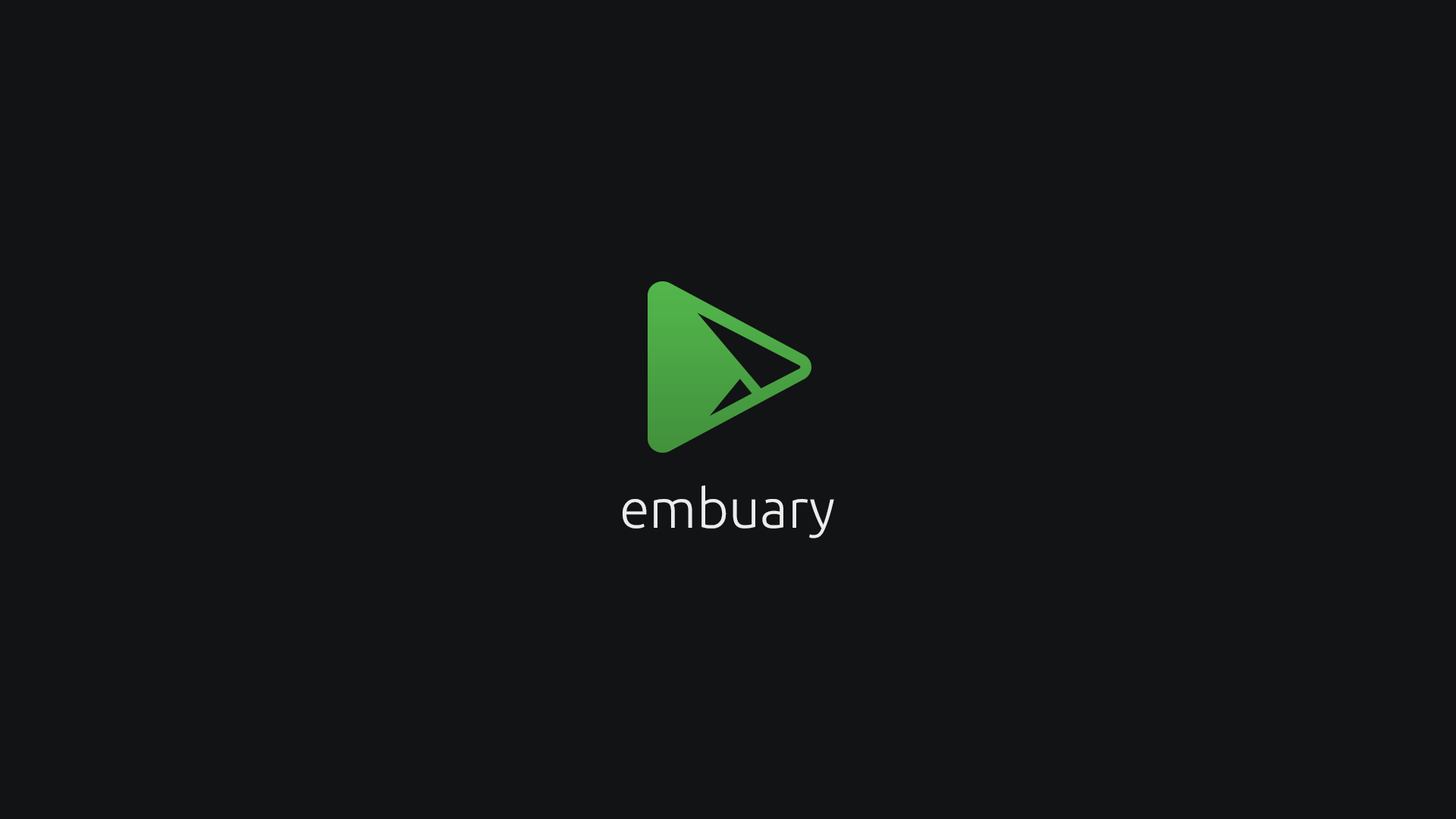
<style>
.page{position:relative;width:1456px;height:819px;background:#121314}
.page>*{position:absolute;margin:0}
.t1{font:54.6px "Ubuntu-Light";color:#ececec}
</style>
<div class="page">
<p class="t1" style="left:623px;top:485px;width:211px;height:53px">embuary</p>
</div>
